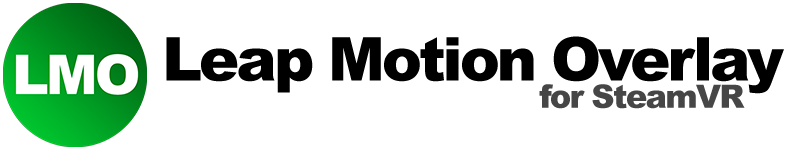
<style>
.page{position:relative;width:800px;height:150px;background:#ffffff}
.page>*{position:absolute;margin:0}
.t1{font:60.1px "Arial-Black";letter-spacing:-0.05em;color:#000000}
.t2{font:32.2px "Arial-Black";letter-spacing:-0.05em;color:#464646}
</style>
<div class="page">
<p class="t1" style="left:166px;top:36px;width:618px;height:58px">Leap Motion Overlay</p>
<p class="t2" style="left:539px;top:84px;width:206px;height:25px">for SteamVR</p>
</div>
